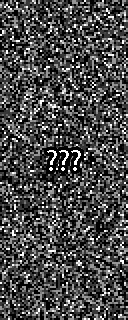
<style>
.page{position:relative;width:128px;height:320px;background:#000000}
.page>*{position:absolute;margin:0}
.t1{font:30px "MyriadPro-Regular";color:#ffffff}
</style>
<div class="page">
<p class="t1" style="left:47px;top:150px;width:34px;height:21px">???</p>
</div>
